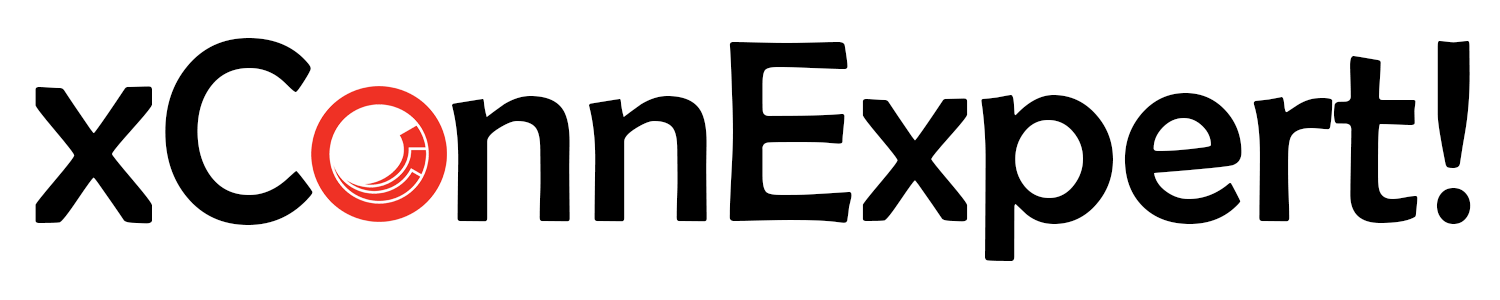
<style>
.page{position:relative;width:1500px;height:300px;background:#ffffff}
.page>*{position:absolute;margin:0}
.t1{font:262.2px "BerlinSansFB-Reg";color:#000000}
.t2{font:293.1px "BerlinSansFB-Reg";color:#000000}
</style>
<div class="page">
<p class="t1" style="left:35px;top:38px;width:1436px;height:223px"><span class="t2">x</span>C  nnExpert!</p>
</div>
